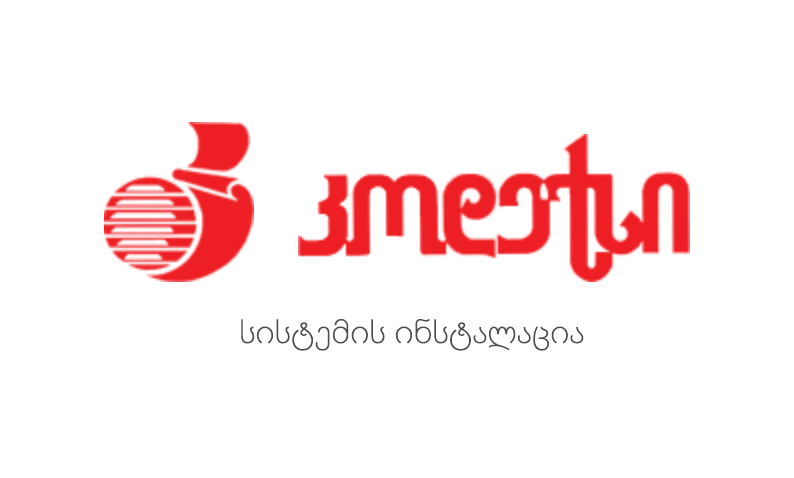
<style>
.page{position:relative;width:794px;height:478px;background:#ffffff}
.page>*{position:absolute;margin:0}
.t1{font:32px "SegoeUI-Light";color:#4e4e4f}
</style>
<div class="page">
<p class="t1" style="left:241px;top:319px;width:343px;height:32px">სისტემის ინსტალაცია</p>
</div>
